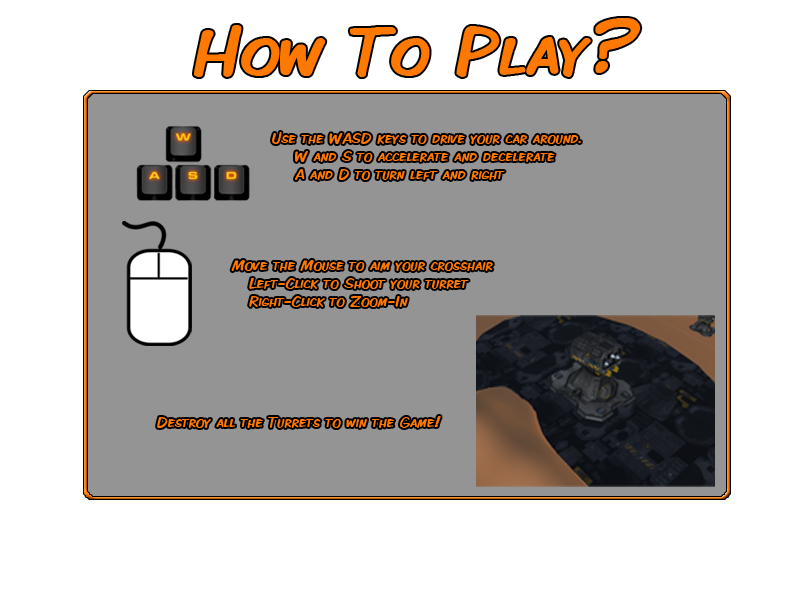
<style>
.page{position:relative;width:800px;height:600px;background:#ffffff}
.page>*{position:absolute;margin:0}
.t1{font:70px "Jivetalk";color:#ff7800}
.t2{font:15px "Jivetalk";color:#ff7800}
</style>
<div class="page">
<p class="t1" style="left:194px;top:18px;width:447px;height:59px">How To Play?</p>
<p class="t2" style="left:272px;top:132px;width:309px;height:48px">Use the WASD keys to drive your car around. <br>    W and S to accelerate and decelerate<br>    A and D to turn left and right</p>
<p class="t2" style="left:231px;top:260px;width:262px;height:47px">Move the Mouse to aim your crosshair<br>   Left-Click to Shoot your turret<br>   Right-Click to Zoom-In</p>
<p class="t2" style="left:157px;top:416px;width:284px;height:12px">Destroy all the Turrets to win the Game!</p>
</div>
